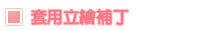
<style>
.page{position:relative;width:200px;height:30px;background:#ffffff}
.page>*{position:absolute;margin:0}
.t1{font:16px "AdobeFanHeitiStd-Bold";color:#f97887;font-weight:bold}
</style>
<div class="page">
<p class="t1" style="left:31px;top:9px;width:98px;height:17px">套用立繪補丁</p>
</div>
